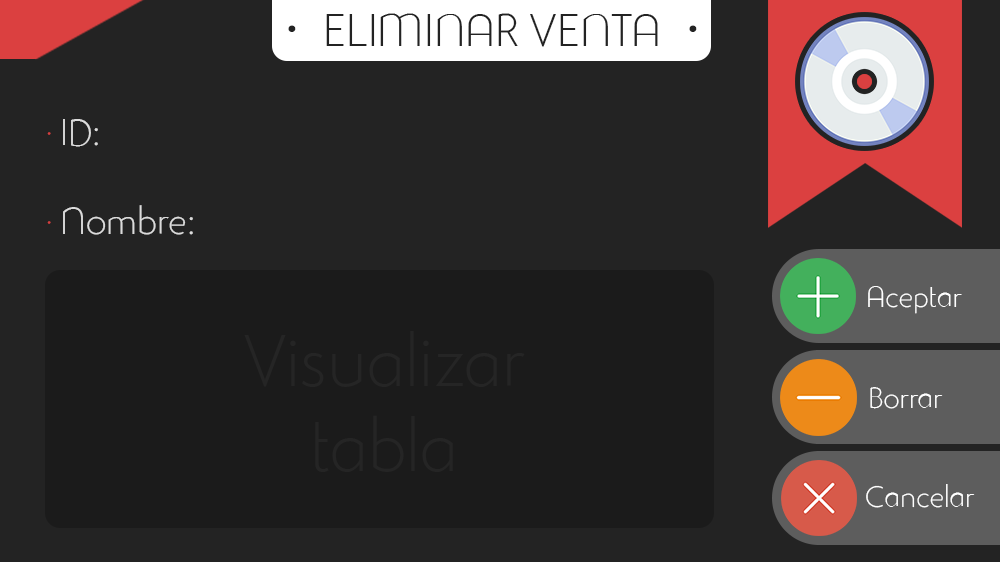
<style>
.page{position:relative;width:1000px;height:562px;background:#232323}
.page>*{position:absolute;margin:0}
.t1{font:45px "StudioGothicAlternateTrial-Extr";color:#232323}
.t2{font:97px "StudioGothicAlternateTrial-Extr";color:#232323}
.t3{font:37px "StudioGothicAlternateTrial-Extr";color:#dbdbdb}
.t4{font:37px "StudioGothicAlternateTrial-Extr";color:#d63f3f}
.t5{font:29px "StudioGothicAlternateTrial-Extr";color:#ffffff}
.t6{font:71px "StudioGothicAlternateTrial-Extr";color:#252525}
</style>
<div class="page">
<p class="t1" style="left:326px;top:13px;width:332px;height:34px">ELIMINAR VENTA</p>
<p class="t2" style="left:288px;top:25px;width:409px;height:7px">·                 ·</p>
<p class="t3" style="left:47px;top:119px;width:146px;height:116px"><span class="t4">· </span>ID:<br><span class="t4"><br>· </span>Nombre:</p>
<p class="t5" style="left:868px;top:286px;width:94px;height:28px">Aceptar</p>
<p class="t6" style="left:244px;top:331px;width:281px;height:141px;text-align:center">Visualizar<br>tabla</p>
<p class="t5" style="left:870px;top:387px;width:73px;height:22px">Borrar</p>
<p class="t5" style="left:866px;top:484px;width:109px;height:24px">Cancelar</p>
</div>
